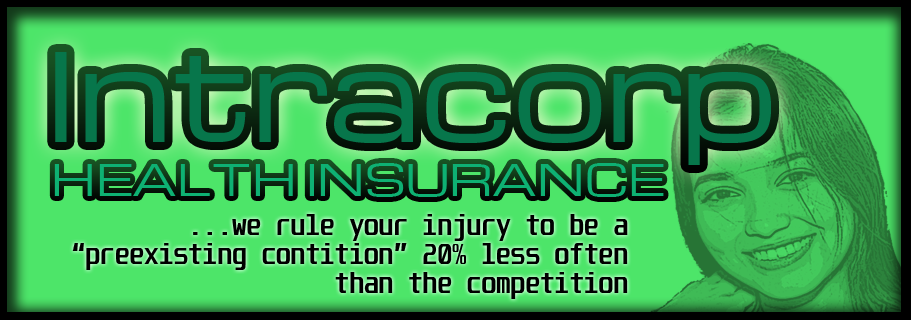
<style>
.page{position:relative;width:911px;height:320px;background:#4de569}
.page>*{position:absolute;margin:0}
.t1{font:120px "Michroma";color:#07754b}
.t2{font:42px "Michroma";color:#0eb172}
.t3{font:24px "Unispace-Bold";color:#000000}
</style>
<div class="page">
<p class="t1" style="left:55px;top:52px;width:716px;height:113px">Intracorp</p>
<p class="t2" style="left:54px;top:163px;width:610px;height:34px">HEALTH INSURANCE</p>
<p class="t3" style="left:72px;top:214px;width:556px;height:85px;text-align:right">...we rule your injury to be a<br>“preexisting contition” 20% less often<br>than the competition</p>
</div>
